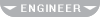
<style>
.page{position:relative;width:100px;height:17px;background:#afb1b4}
.page>*{position:absolute;margin:0}
.t1{font:11px "System";color:#ffffff}
</style>
<div class="page">
<p class="t1" style="left:21px;top:4px;width:60px;height:8px">ENGINEER</p>
</div>
